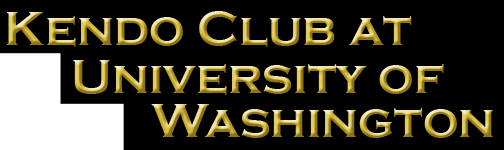
<style>
.page{position:relative;width:504px;height:150px;background:#000000}
.page>*{position:absolute;margin:0}
.t1{font:50px "CopperplateGothic-Bold"}
</style>
<div class="page">
<p class="t1" style="left:7px;top:11px;width:405px;height:36px">Kendo Club at</p>
<p class="t1" style="left:73px;top:60px;width:371px;height:35px">University of</p>
<p class="t1" style="left:151px;top:104px;width:342px;height:34px">Washington</p>
</div>
